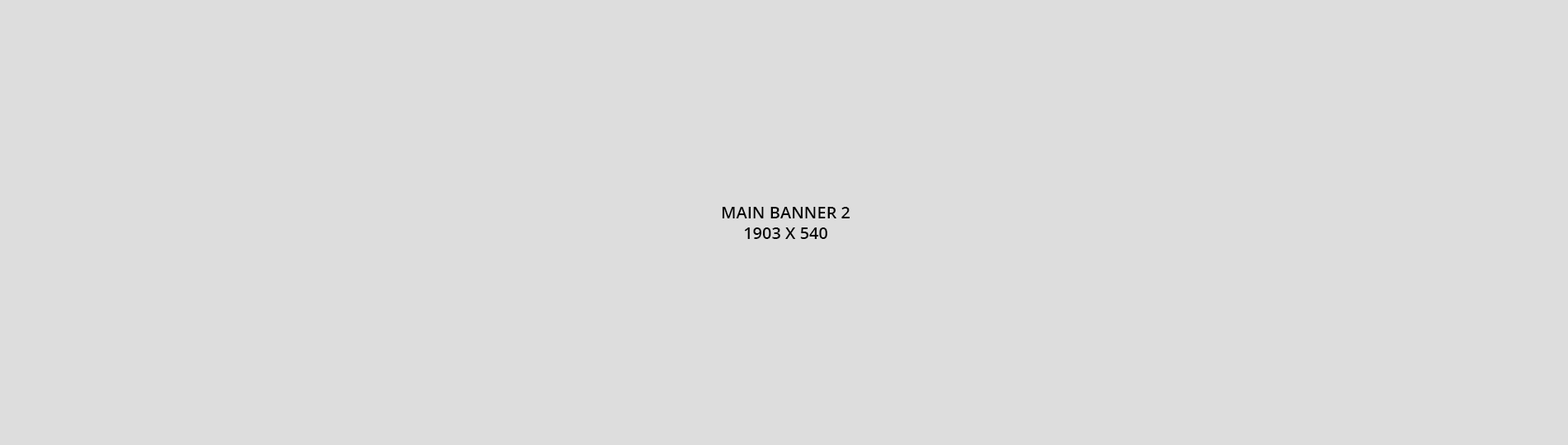
<style>
.page{position:relative;width:1568px;height:445px;background:#dddddd}
.page>*{position:absolute;margin:0}
.t1{font:16.5px/20.6px "OpenSans-Semibold";color:#000000;text-transform:uppercase}
</style>
<div class="page">
<p class="t1" style="left:722px;top:207px;width:128px;height:32px;text-align:center">main banner 2<br>1903 x 540</p>
</div>
